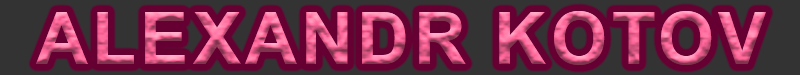
<style>
.page{position:relative;width:800px;height:75px;background:#660033}
.page>*{position:absolute;margin:0}
.t1{font:72px "Arial-BoldMT";letter-spacing:0.06em}
</style>
<div class="page">
<p class="t1" style="left:36px;top:11px;width:730px;height:54px">ALEXANDR KOTOV</p>
</div>
